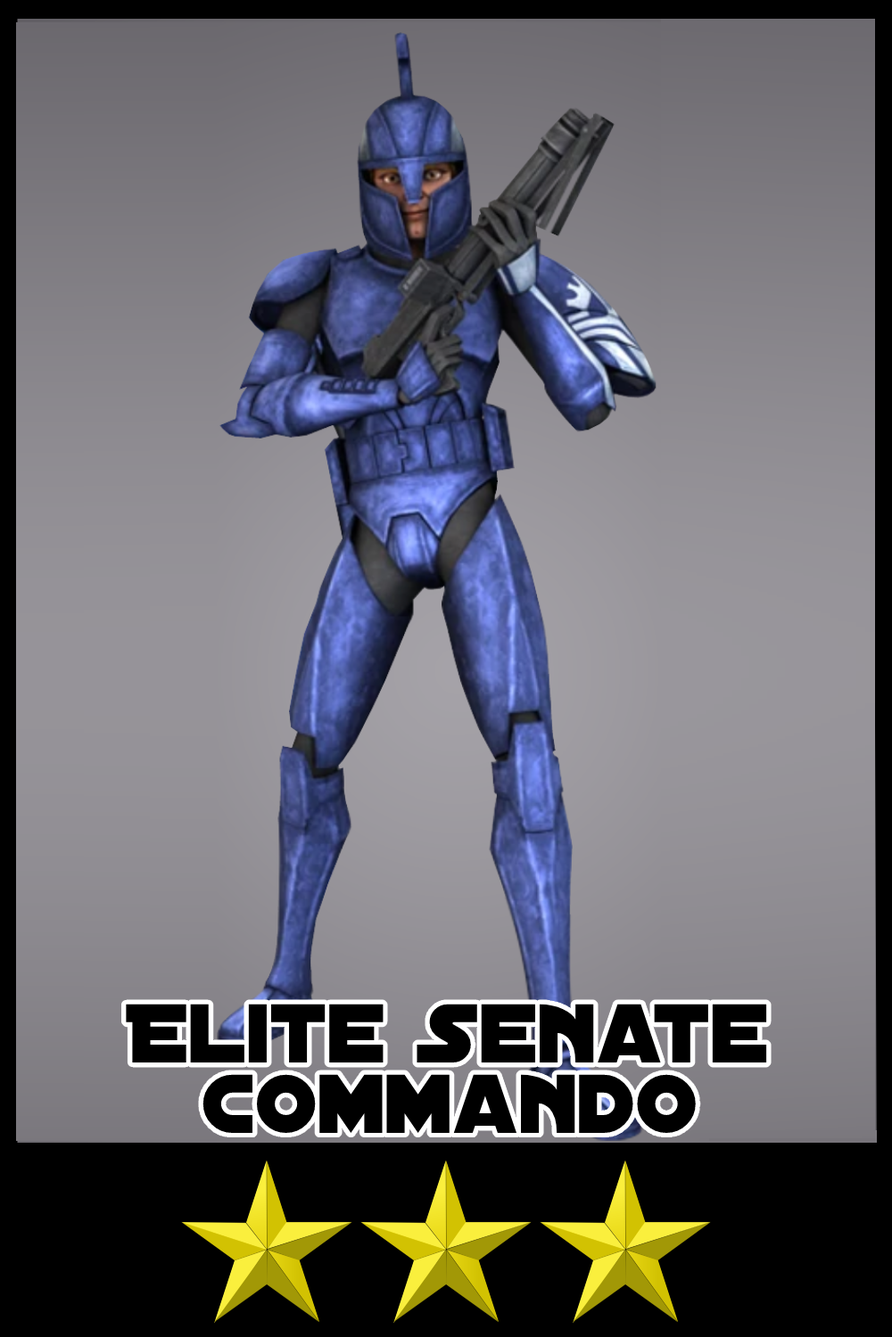
<style>
.page{position:relative;width:892px;height:1337px}
.page>*{position:absolute;margin:0}
.t1{font:89.5px/70.2px "DistantGalaxy";color:#000000}
</style>
<div class="page">
<p class="t1" style="left:126px;top:1004px;width:641px;height:129px;text-align:center">Elite Senate<br>Commando</p>
</div>
